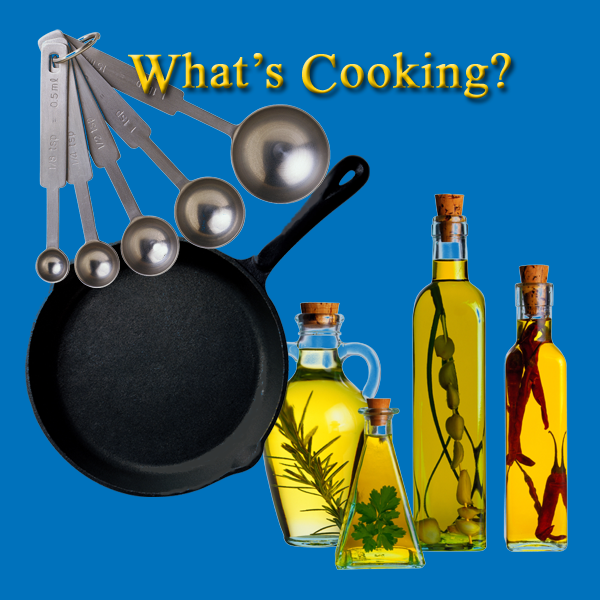
<style>
.page{position:relative;width:600px;height:600px;background:#0072bc}
.page>*{position:absolute;margin:0}
.t1{font:50px "TimesNewRomanPSMT";letter-spacing:0.01em;font-weight:bold}
.t2{font:56px "TimesNewRomanPSMT";letter-spacing:0.01em;font-weight:bold}
</style>
<div class="page">
<p class="t1" style="left:128px;top:52px;width:383px;height:47px"><span class="t2">W</span>hat’s <span class="t2">C</span>ooking?</p>
</div>
